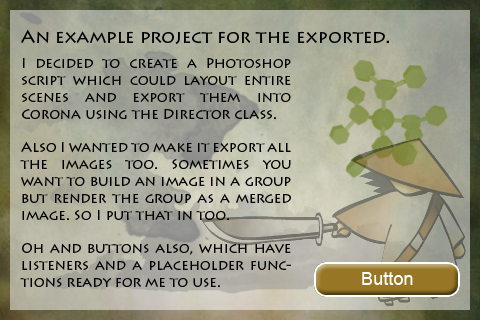
<style>
.page{position:relative;width:480px;height:320px}
.page>*{position:absolute;margin:0}
.t1{font:18px "LithosPro-Regular";color:#000000}
.t2{font:14px "LithosPro-Regular";color:#000000}
.t3{font:18.2px "ArialMT";color:#ffffff}
</style>
<div class="page">
<p class="t1" style="left:21px;top:29px;width:368px;height:15px">An example project for the exported.</p>
<p class="t2" style="left:20px;top:58px;width:271px;height:229px;text-align:justify">I decided to create a Photoshop script which could layout entire scenes and export them into Corona using the Director class. <br><br>Also I wanted to make it export all the images too. Sometimes you want to build an image in a group but render the group as a merged image. So I put that in too. <br><br>Oh and buttons also, which have listeners and a placeholder functions ready for me to use.</p>
<p class="t3" style="left:362px;top:272px;width:51px;height:13px">Button</p>
<p class="t3" style="left:362px;top:272px;width:51px;height:13px">Button</p>
</div>
